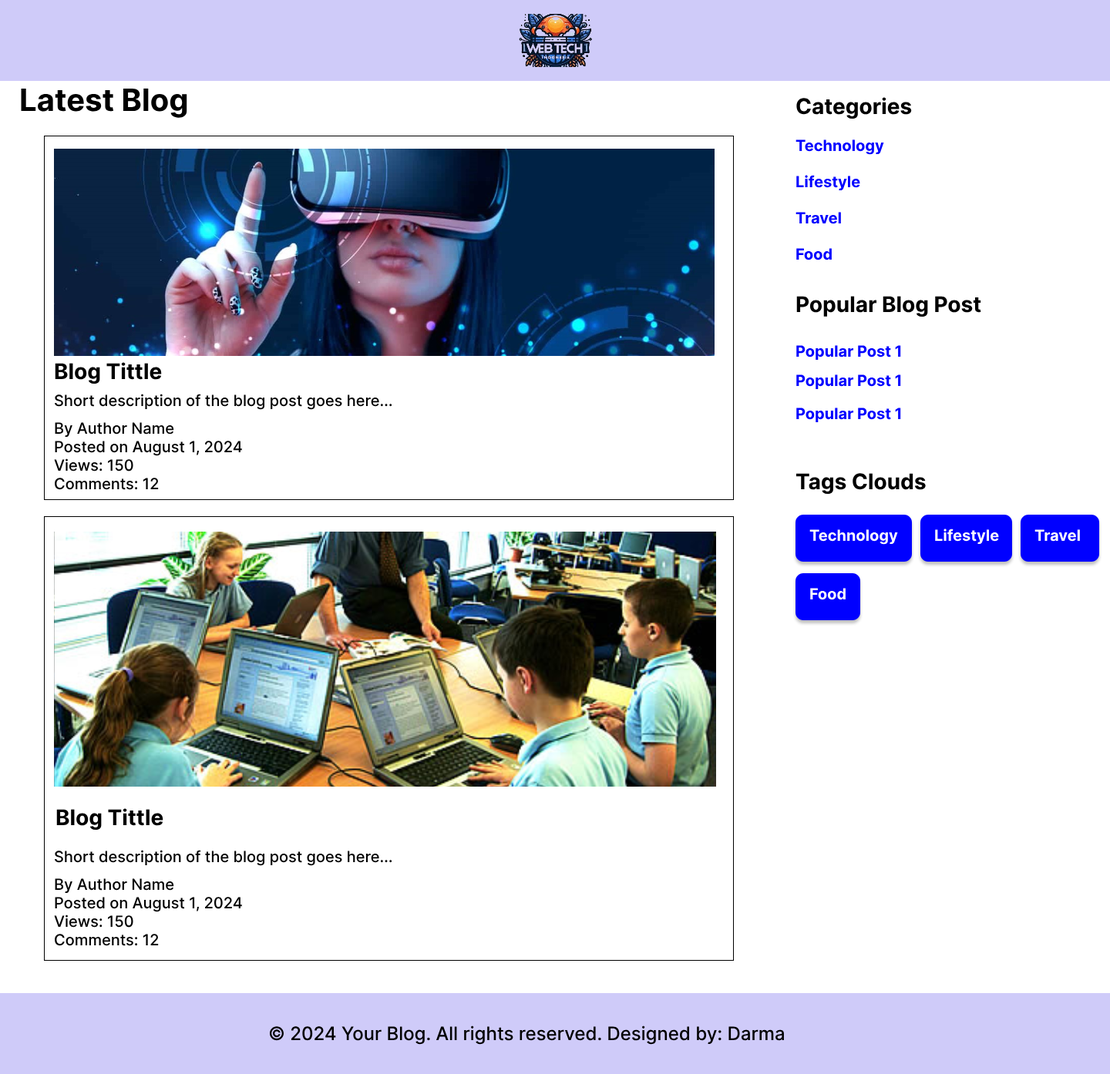
<style>
.page{position:relative;width:1110px;height:1074px;background:#ffffff}
.page>*{position:absolute;margin:0}
.t1{font:30.8px "Inter-Bold";color:#000000}
.t2{font:21.6px "Inter-Bold";color:#000000}
.t3{font:15.4px "Inter-Bold";color:#0000ff}
.t4{font:15.4px "Inter-Medium";color:#000000}
.t5{font:15.4px "Inter-Bold";color:#ffffff}
.t6{font:18.5px "Inter-Medium";color:#000000}
</style>
<div class="page">
<p class="t1" style="left:21px;top:88px;width:166px;height:30px">Latest Blog</p>
<p class="t2" style="left:796px;top:97px;width:116px;height:22px">Categories</p>
<p class="t3" style="left:795px;top:140px;width:89px;height:15px">Technology</p>
<p class="t3" style="left:796px;top:175px;width:64px;height:16px">Lifestyle</p>
<p class="t3" style="left:795px;top:212px;width:46px;height:12px">Travel</p>
<p class="t3" style="left:796px;top:248px;width:36px;height:13px">Food</p>
<p class="t2" style="left:796px;top:296px;width:185px;height:22px">Popular Blog Post</p>
<p class="t3" style="left:796px;top:345px;width:105px;height:16px">Popular Post 1</p>
<p class="t2" style="left:55px;top:362px;width:107px;height:23px">Blog Tittle</p>
<p class="t3" style="left:796px;top:375px;width:105px;height:15px">Popular Post 1</p>
<p class="t4" style="left:55px;top:394px;width:337px;height:16px">Short description of the blog post goes here...</p>
<p class="t3" style="left:796px;top:408px;width:105px;height:15px">Popular Post 1</p>
<p class="t4" style="left:54px;top:422px;width:188px;height:68px">By Author Name<br>Posted on August 1, 2024<br>Views: 150<br>Comments: 12</p>
<p class="t2" style="left:795px;top:473px;width:131px;height:22px">Tags Clouds</p>
<p class="t5" style="left:809px;top:529px;width:89px;height:16px">Technology</p>
<p class="t5" style="left:935px;top:529px;width:64px;height:16px">Lifestyle</p>
<p class="t5" style="left:1034px;top:529px;width:46px;height:13px">Travel</p>
<p class="t5" style="left:810px;top:588px;width:35px;height:12px">Food</p>
<p class="t2" style="left:56px;top:808px;width:107px;height:23px">Blog Tittle</p>
<p class="t4" style="left:55px;top:850px;width:337px;height:16px">Short description of the blog post goes here...</p>
<p class="t4" style="left:54px;top:879px;width:188px;height:67px">By Author Name<br>Posted on August 1, 2024<br>Views: 150<br>Comments: 12</p>
<p class="t6" style="left:269px;top:1026px;width:515px;height:19px">© 2024 Your Blog. All rights reserved. Designed by: Darma</p>
</div>
